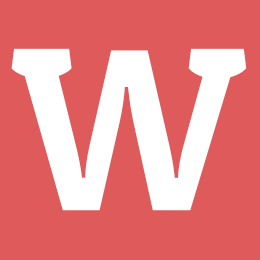
<style>
.page{position:relative;width:260px;height:260px;background:#df5a5a}
.page>*{position:absolute;margin:0}
.t1{font:232px "PatuaOne-Regular";letter-spacing:0.01em;color:#ffffff}
</style>
<div class="page">
<p class="t1" style="left:11px;top:48px;width:236px;height:163px">W</p>
</div>
